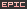
<style>
.page{position:relative;width:27px;height:9px;background:#333333}
.page>*{position:absolute;margin:0}
.t1{font:8px "5x5-Pixel";color:#fdb5b0}
</style>
<div class="page">
<p class="t1" style="left:2px;top:2px;width:23px;height:5px">epic</p>
</div>
